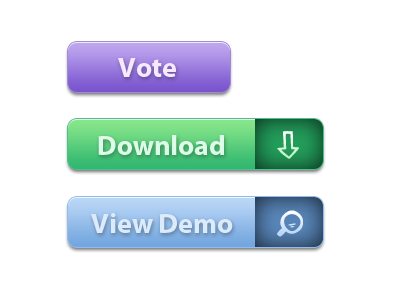
<style>
.page{position:relative;width:400px;height:300px;background:#ffffff}
.page>*{position:absolute;margin:0}
.t1{font:28px "MyriadPro-Bold";color:#f5e8ff}
.t2{font:28px "MyriadPro-Bold";color:#dcfbe8}
.t3{font:28px "MyriadPro-Bold";color:#dcebfb}
</style>
<div class="page">
<p class="t1" style="left:118px;top:58px;width:58px;height:19px">Vote</p>
<p class="t2" style="left:98px;top:135px;width:126px;height:20px">Download</p>
<p class="t3" style="left:91px;top:213px;width:142px;height:20px">View Demo</p>
</div>
